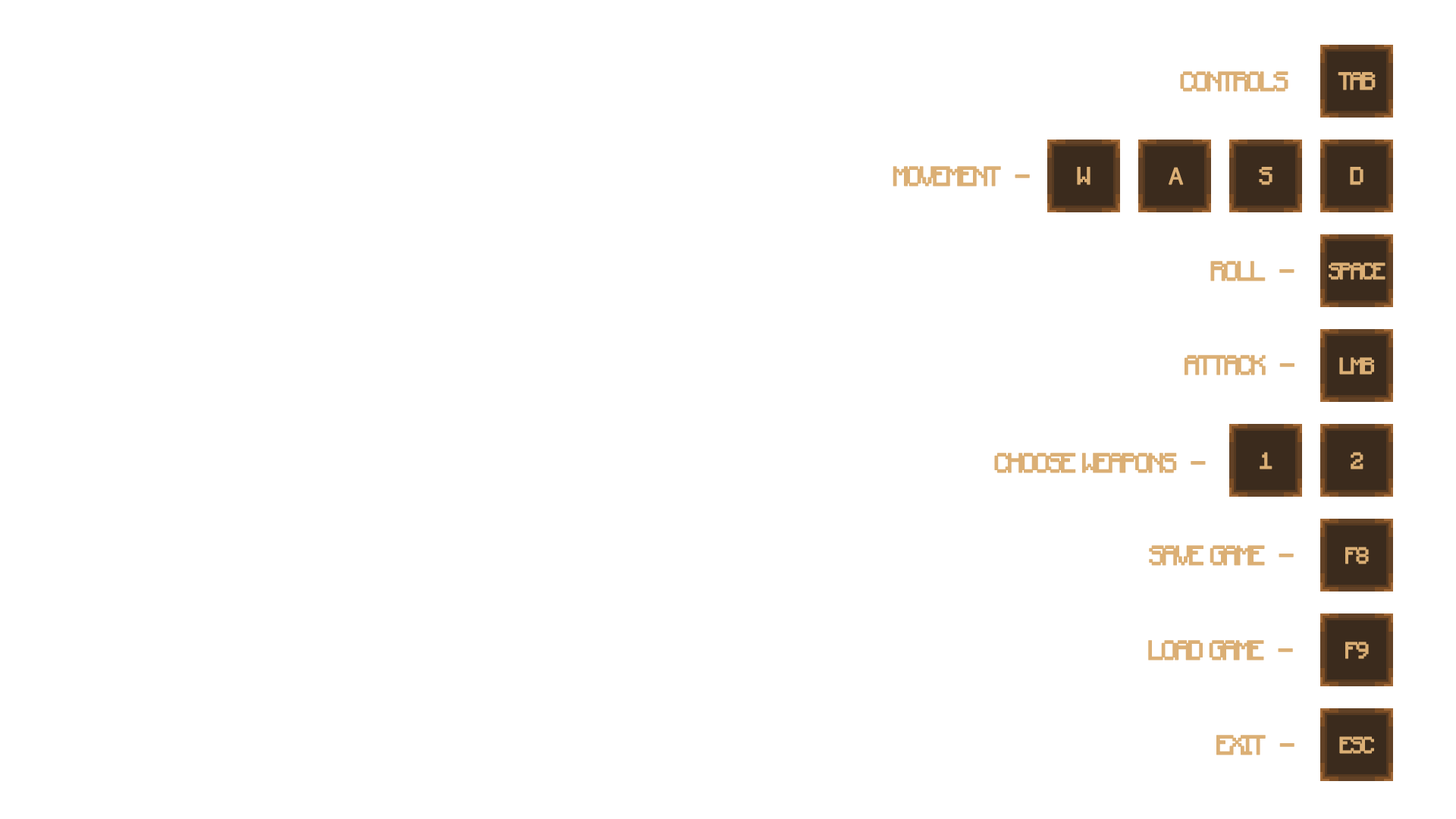
<style>
.page{position:relative;width:1456px;height:819px;background:#ffffff}
.page>*{position:absolute;margin:0}
.t1{font:27.3px "Minecraft-Regular";letter-spacing:-0.14em;color:#dbaf75;text-transform:uppercase;font-weight:bold}
.t2{font:24.3px "Minecraft-Regular";letter-spacing:-0.14em;color:#dbaf75;text-transform:uppercase;font-weight:bold}
.t3{font:24.3px "MyriadPro-Regular";letter-spacing:-0.14em;color:#dbaf75;text-transform:uppercase;font-weight:bold}
.t4{font:22.7px "Minecraft-Regular";letter-spacing:-0.14em;color:#dbaf75;text-transform:uppercase;font-weight:bold}
</style>
<div class="page">
<p class="t1" style="left:1180px;top:71px;width:108px;height:21px">COntrols</p>
<p class="t2" style="left:1338px;top:72px;width:38px;height:18px">TAB</p>
<p class="t1" style="left:893px;top:166px;width:137px;height:21px">MOVEMENT  -</p>
<p class="t2" style="left:1077px;top:167px;width:13px;height:18px">W</p>
<p class="t3" style="left:1169px;top:167px;width:15px;height:18px">A</p>
<p class="t2" style="left:1259px;top:167px;width:13px;height:18px">S</p>
<p class="t2" style="left:1350px;top:167px;width:13px;height:18px">D</p>
<p class="t1" style="left:1210px;top:261px;width:84px;height:20px">ROLL  -</p>
<p class="t4" style="left:1329px;top:262px;width:56px;height:18px">SPACE</p>
<p class="t1" style="left:1185px;top:355px;width:109px;height:20px">Attack  -</p>
<p class="t4" style="left:1339px;top:357px;width:35px;height:18px">LMB</p>
<p class="t1" style="left:994px;top:453px;width:212px;height:20px">Choose WEApons  -</p>
<p class="t4" style="left:1260px;top:452px;width:12px;height:17px">1</p>
<p class="t4" style="left:1351px;top:452px;width:12px;height:17px">2</p>
<p class="t1" style="left:1149px;top:545px;width:145px;height:21px">SAVE Game  -</p>
<p class="t4" style="left:1345px;top:547px;width:24px;height:17px">F8</p>
<p class="t1" style="left:1148px;top:640px;width:145px;height:20px">Load Game  -</p>
<p class="t4" style="left:1345px;top:642px;width:24px;height:17px">F9</p>
<p class="t1" style="left:1216px;top:735px;width:78px;height:20px">Exit  -</p>
<p class="t4" style="left:1339px;top:736px;width:35px;height:18px">Esc</p>
</div>
